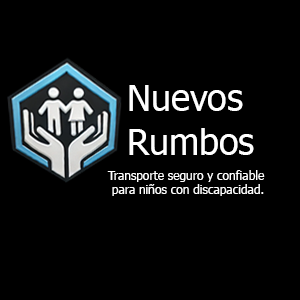
<style>
.page{position:relative;width:300px;height:300px;background:#000000}
.page>*{position:absolute;margin:0}
.t1{font:36px "Tahoma";color:#ffffff}
.t2{font:12px "Tahoma";color:#ffffff}
</style>
<div class="page">
<p class="t1" style="left:129px;top:85px;width:125px;height:70px">Nuevos <br>Rumbos</p>
<p class="t2" style="left:107px;top:170px;width:158px;height:26px;text-align:center">Transporte seguro y confiable <br>para niños con discapacidad.</p>
</div>
